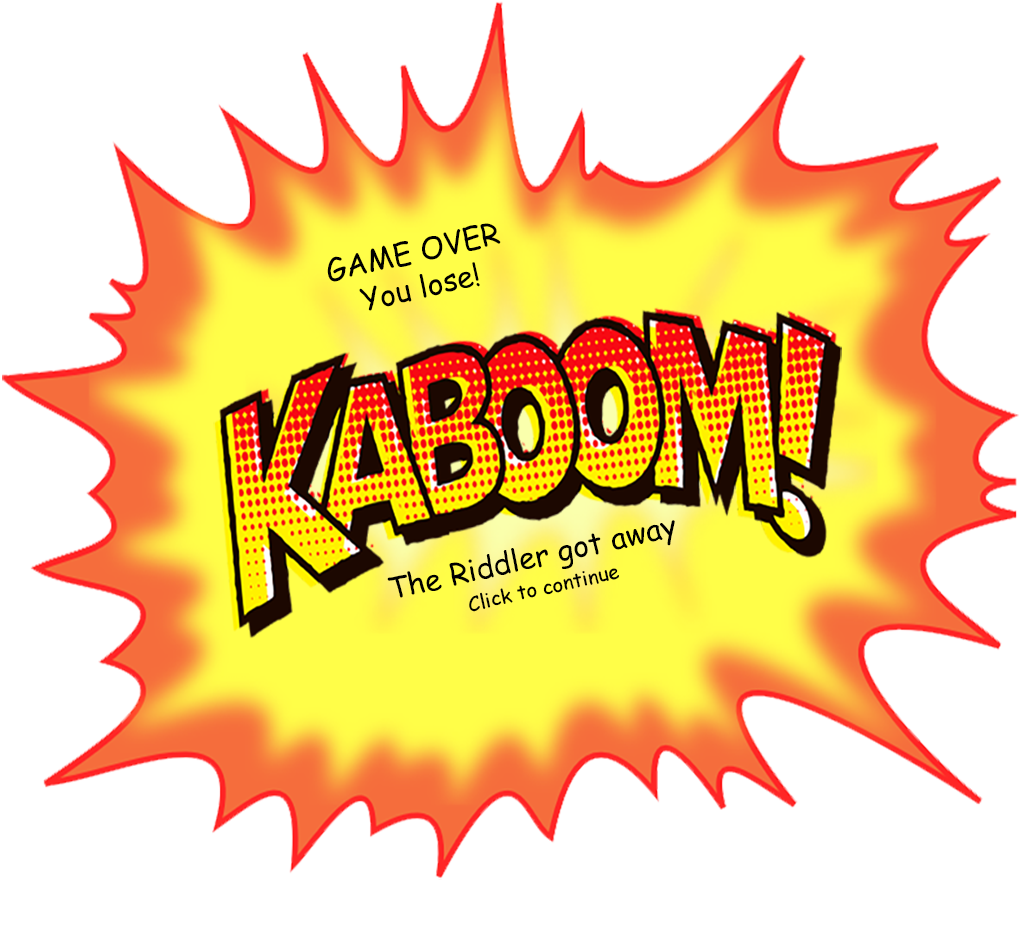
<style>
.page{position:relative;width:1024px;height:944px;background:#ffffff}
.page>*{position:absolute;margin:0}
.t1{font:30px "ComicSansMS";color:#000000}
.t2{font:20px "ComicSansMS";color:#000000}
</style>
<div class="page">
<p class="t1" style="left:327px;top:223px;width:348px;height:389px;text-align:center;rotate:-13deg">GAME OVER<br>You lose!<br>                                                 <br><br><br><br><br><br><br>           The Riddler got away<br>                 <span class="t2">Click to continue</span></p>
</div>
